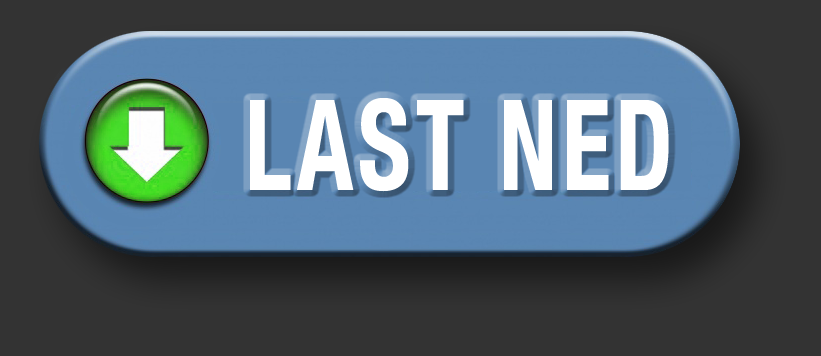
<style>
.page{position:relative;width:821px;height:356px;background:#333333}
.page>*{position:absolute;margin:0}
.t1{font:126.5px "HelveticaNeue-CondensedBold";letter-spacing:0.05em;color:#ffffff;scale:0.8 1}
</style>
<div class="page">
<p class="t1" style="left:250px;top:98px;width:419px;height:94px">LAST NED</p>
</div>
